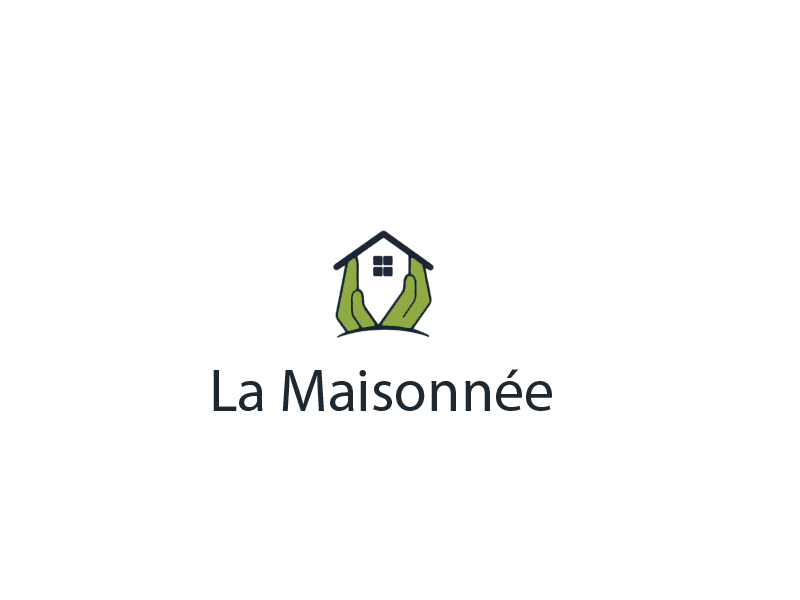
<style>
.page{position:relative;width:800px;height:600px;background:#ffffff}
.page>*{position:absolute;margin:0}
.t1{font:60px "MyriadPro-Regular";color:#1d2831}
</style>
<div class="page">
<p class="t1" style="left:213px;top:369px;width:339px;height:42px">La Maisonnée</p>
</div>
